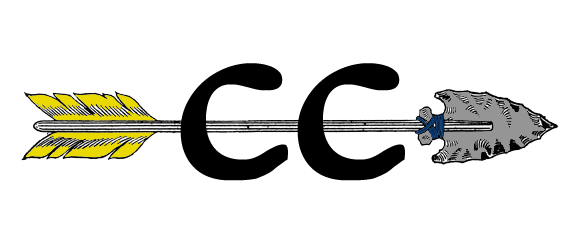
<style>
.page{position:relative;width:576px;height:250px;background:#ffffff}
.page>*{position:absolute;margin:0}
.t1{font:240px "FirstOrder";color:#000000}
</style>
<div class="page">
<p class="t1" style="left:180px;top:63px;width:225px;height:118px">cc</p>
</div>
